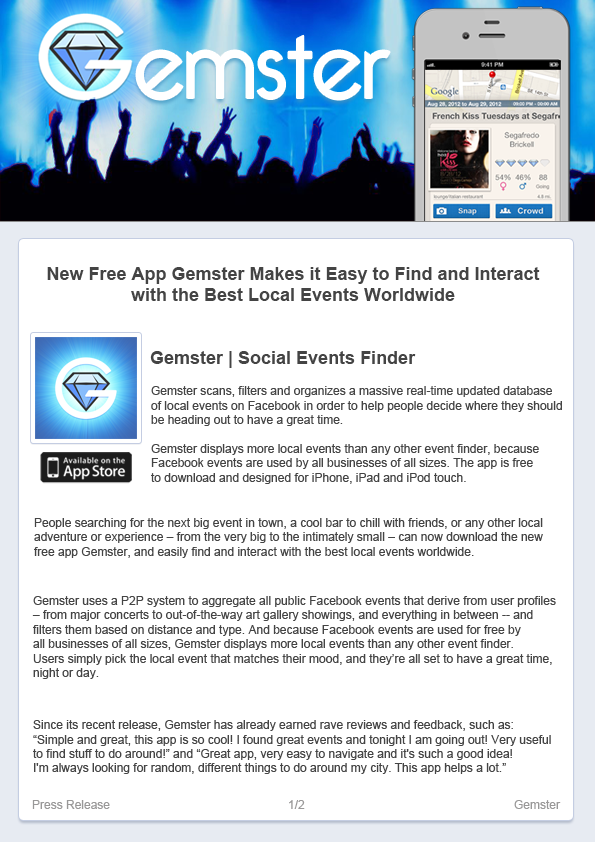
<style>
.page{position:relative;width:595px;height:842px;background:#ffffff}
.page>*{position:absolute;margin:0}
.t1{font:18px "Arial-BoldMT";color:#444444}
.t2{font:12px "ArialMT";color:#444444}
.t3{font:12px "ArialMT";color:#999898}
</style>
<div class="page">
<p class="t1" style="left:47px;top:267px;width:493px;height:34px;text-align:center">New Free App Gemster Makes it Easy to Find and Interact<br>with the Best Local Events Worldwide</p>
<p class="t1" style="left:150px;top:351px;width:266px;height:17px">Gemster | Social Events Finder</p>
<p class="t2" style="left:151px;top:386px;width:411px;height:98px">Gemster scans, filters and organizes a massive real-time updated database<br>of local events on Facebook in order to help people decide where they should<br>be heading out to have a great time.<br><br>Gemster displays more local events than any other event finder, because<br>Facebook events are used by all businesses of all sizes. The app is free<br>to download and designed for iPhone, iPad and iPod touch.</p>
<p class="t2" style="left:34px;top:518px;width:509px;height:40px">People searching for the next big event in town, a cool bar to chill with friends, or any other local<br>adventure or experience – from the very big to the intimately small – can now download the new<br>free app Gemster, and easily find and interact with the best local events worldwide.</p>
<p class="t2" style="left:32px;top:596px;width:524px;height:83px">Gemster uses a P2P system to aggregate all public Facebook events that derive from user profiles<br>– from major concerts to out-of-the-way art gallery showings, and everything in between -- and<br>filters them based on distance and type. And because Facebook events are used for free by<br>all businesses of all sizes, Gemster displays more local events than any other event finder.<br>Users simply pick the local event that matches their mood, and they’re all set to have a great time,<br>night or day.</p>
<p class="t2" style="left:33px;top:720px;width:518px;height:54px">Since its recent release, Gemster has already earned rave reviews and feedback, such as:<br>“Simple and great, this app is so cool! I found great events and tonight I am going out! Very useful<br>to find stuff to do around!” and “Great app, very easy to navigate and it's such a good idea!<br>I'm always looking for random, different things to do around my city. This app helps a lot.”</p>
<p class="t3" style="left:32px;top:800px;width:78px;height:9px">Press Release</p>
<p class="t3" style="left:289px;top:800px;width:16px;height:9px">1/2</p>
<p class="t3" style="left:514px;top:800px;width:47px;height:9px">Gemster</p>
</div>
